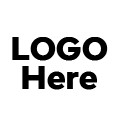
<style>
.page{position:relative;width:120px;height:120px;background:#ffffff}
.page>*{position:absolute;margin:0}
.t1{font:32.7px/29px "IntelOneDisplay-Bold";letter-spacing:0.02em;color:#000000}
</style>
<div class="page">
<p class="t1" style="left:12px;top:37px;width:96px;height:53px;text-align:center">LOGO<br>Here</p>
</div>
